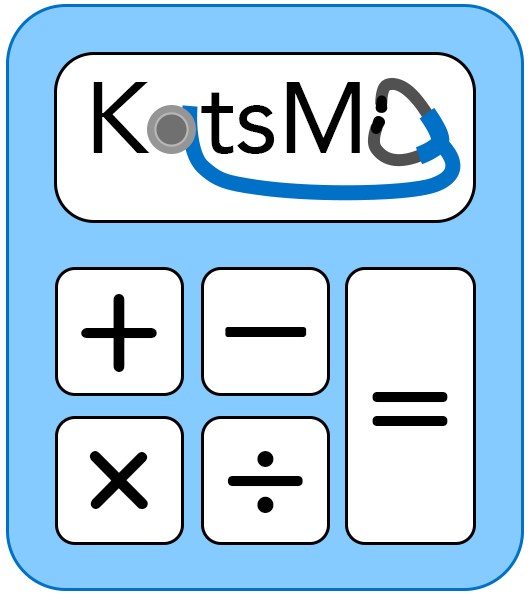
<style>
.page{position:relative;width:530px;height:594px;background:#ffffff}
.page>*{position:absolute;margin:0}
.t1{font:100px "Avenir-Roman";color:#000000}
.t2{font:150px "Courier";color:#000000}
.t3{font:125px "Courier";color:#000000}
</style>
<div class="page">
<p class="t1" style="left:93px;top:82px;width:57px;height:71px">K</p>
<p class="t1" style="left:201px;top:82px;width:159px;height:72px">tsM</p>
<p class="t2" style="left:81px;top:294px;width:76px;height:78px">+</p>
<p class="t3" style="left:225px;top:327px;width:82px;height:10px">–</p>
<p class="t2" style="left:372px;top:392px;width:76px;height:34px">=</p>
<p class="t2" style="left:89px;top:451px;width:59px;height:58px">×</p>
<p class="t2" style="left:227px;top:451px;width:76px;height:62px">÷</p>
</div>
